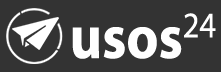
<style>
.page{position:relative;width:221px;height:72px;background:#333333}
.page>*{position:absolute;margin:0}
.t1{font:62px "MyriadPro-Bold";color:#ffffff;scale:0.9 1}
.t2{font:62px "MyriadPro-Regular";color:#ffffff;scale:0.9 1}
</style>
<div class="page">
<p class="t1" style="left:72px;top:13px;width:144px;height:46px">usos<span class="t2">24</span></p>
</div>
